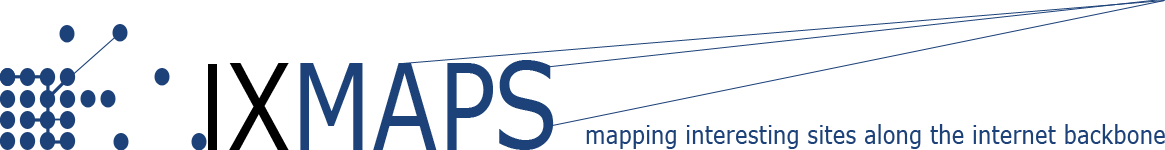
<style>
.page{position:relative;width:1165px;height:150px;background:#ffffff}
.page>*{position:absolute;margin:0}
.t1{font:24.5px "Verdana";color:#1d4279;scale:0.87 1}
</style>
<div class="page">
<p class="t1" style="left:586px;top:124px;width:579px;height:25px">mapping interesting sites along the internet backbone</p>
</div>
